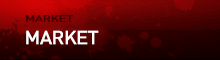
<style>
.page{position:relative;width:220px;height:60px}
.page>*{position:absolute;margin:0}
.t1{font:9.3px "HCRDotum-Bold";color:#420000;scale:1.28 1}
.t2{font:18.2px "HCRDotum-Bold";color:#ffffff}
</style>
<div class="page">
<p class="t1" style="left:26px;top:15px;width:47px;height:7px">MARKET</p>
<p class="t2" style="left:26px;top:30px;width:73px;height:15px">MARKET</p>
</div>
